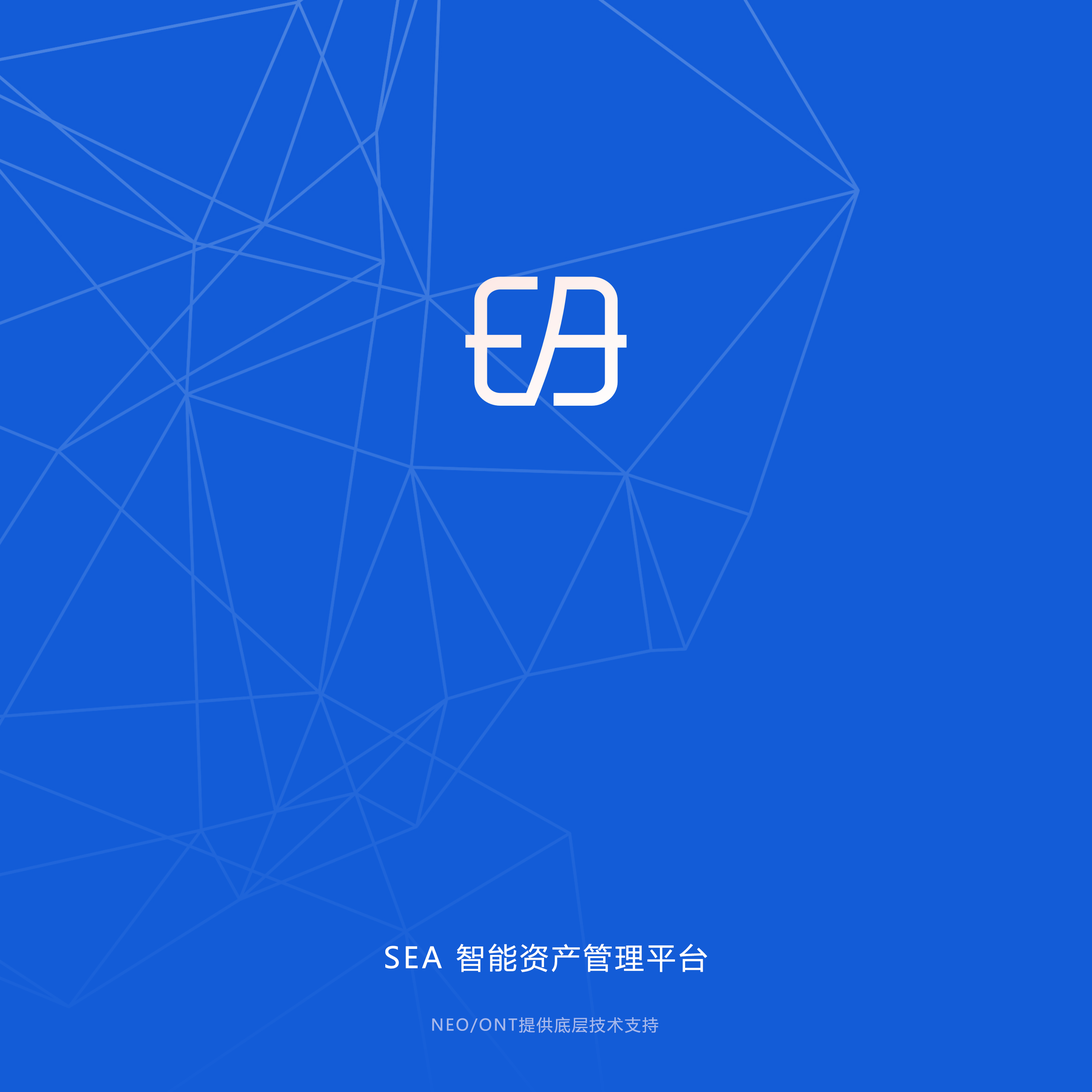
<style>
.page{position:relative;width:1092px;height:1092px;background:#135cd7}
.page>*{position:absolute;margin:0}
.t1{font:28.8px "MicrosoftYaHei";letter-spacing:0.1em;color:#fefefe}
.t2{font:16px "MicrosoftYaHei";letter-spacing:0.1em;color:#a7b9eb}
</style>
<div class="page">
<p class="t1" style="left:385px;top:944px;width:322px;height:28px">SEA 智能资产管理平台</p>
<p class="t2" style="left:432px;top:1017px;width:226px;height:16px">NEO/ONT提供底层技术支持</p>
</div>
